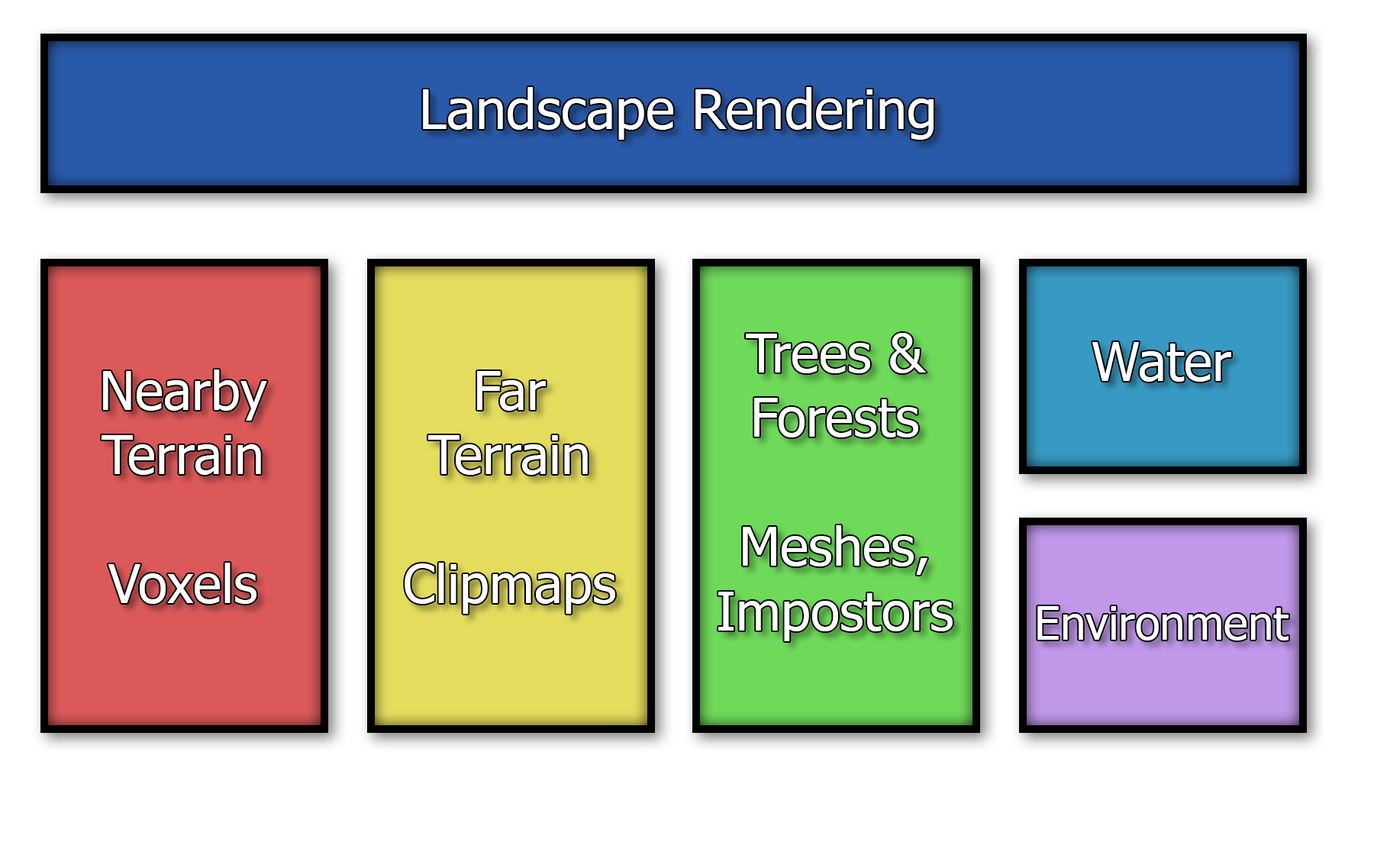
<style>
.page{position:relative;width:1374px;height:868px;background:#ffffff}
.page>*{position:absolute;margin:0}
.t1{font:55px "Tahoma";color:#ffffff}
.t2{font:53.7px "Tahoma";color:#ffffff}
.t3{font:45.8px "Tahoma";color:#ffffff}
</style>
<div class="page">
<p class="t1" style="left:423px;top:87px;width:511px;height:53px">Landscape Rendering</p>
<p class="t2" style="left:718px;top:333px;width:235px;height:308px;text-align:center">Trees &amp;<br>Forests<br><br>Meshes,<br>Impostors</p>
<p class="t2" style="left:1092px;top:342px;width:139px;height:40px">Water</p>
<p class="t2" style="left:102px;top:369px;width:165px;height:235px;text-align:center">Nearby<br>Terrain<br><br>Voxels</p>
<p class="t2" style="left:405px;top:371px;width:210px;height:243px;text-align:center">Far<br>Terrain<br><br>Clipmaps</p>
<p class="t3" style="left:1037px;top:606px;width:251px;height:34px">Environment</p>
</div>
